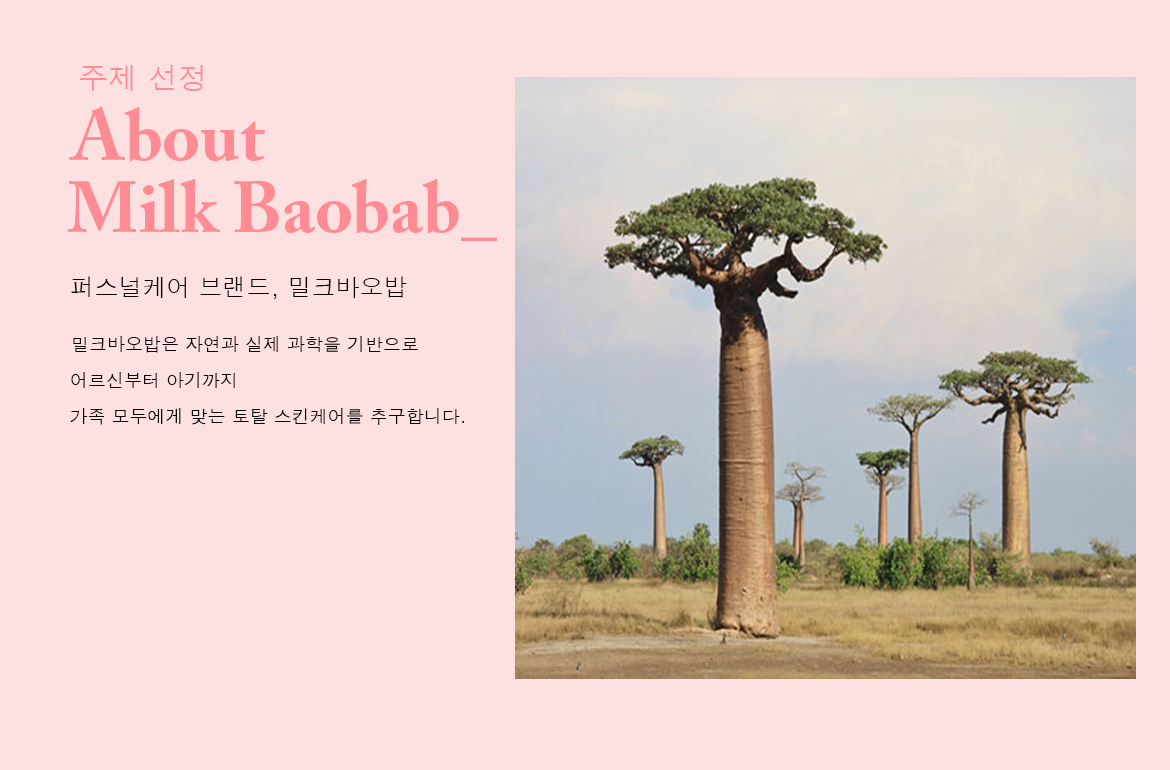
<style>
.page{position:relative;width:1170px;height:770px;background:#fde1e1}
.page>*{position:absolute;margin:0}
.t1{font:30px "Dotum";color:#ff8b94}
.t2{font:72px "ACaslonPro-Bold";color:#ff8b94}
.t3{font:24px "Dotum";color:#090102}
.t4{font:18px "Dotum";color:#090102}
</style>
<div class="page">
<p class="t1" style="left:80px;top:65px;width:123px;height:26px">주제 선정</p>
<p class="t2" style="left:69px;top:106px;width:196px;height:55px">About</p>
<p class="t2" style="left:68px;top:179px;width:429px;height:62px">Milk Baobab_</p>
<p class="t3" style="left:71px;top:276px;width:336px;height:24px">퍼스널케어 브랜드, 밀크바오밥</p>
<p class="t4" style="left:73px;top:336px;width:345px;height:17px">밀크바오밥은 자연과 실제 과학을 기반으로</p>
<p class="t4" style="left:71px;top:372px;width:164px;height:16px">어르신부터 아기까지</p>
<p class="t4" style="left:70px;top:408px;width:394px;height:17px">가족 모두에게 맞는 토탈 스킨케어를 추구합니다.</p>
</div>
